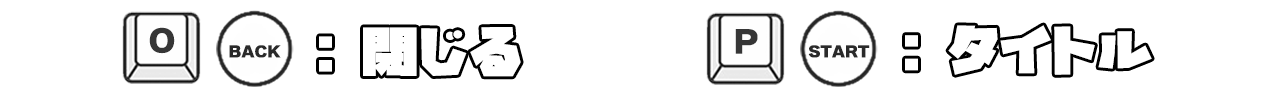
<style>
.page{position:relative;width:1280px;height:100px;background:#ffffff}
.page>*{position:absolute;margin:0}
.t1{font:29.5px "WanpakuRuika-08";letter-spacing:0.05em;color:#363636;font-weight:bold;scale:1.1 1}
.t2{font:50px "GN-KMBFont-UB-OldstyleKana";letter-spacing:0.05em;color:#ffffff;scale:1.1 1}
.t3{font:60px "WanpakuRuika-08";letter-spacing:0.05em;color:#ffffff;scale:1.1 1}
.t4{font:14.5px "WanpakuRuika-08";letter-spacing:-0.02em;color:#2a2a2a;font-weight:bold;scale:1.1 1}
</style>
<div class="page">
<p class="t1" style="left:149px;top:27px;width:26px;height:27px">O</p>
<p class="t2" style="left:319px;top:27px;width:202px;height:50px"><span class="t3">: </span>閉じる</p>
<p class="t1" style="left:735px;top:29px;width:23px;height:25px">P</p>
<p class="t2" style="left:905px;top:25px;width:247px;height:50px"><span class="t3">: </span>タイトル</p>
<p class="t4" style="left:229px;top:45px;width:52px;height:13px">BACK</p>
<p class="t4" style="left:808px;top:45px;width:62px;height:13px">START</p>
</div>
